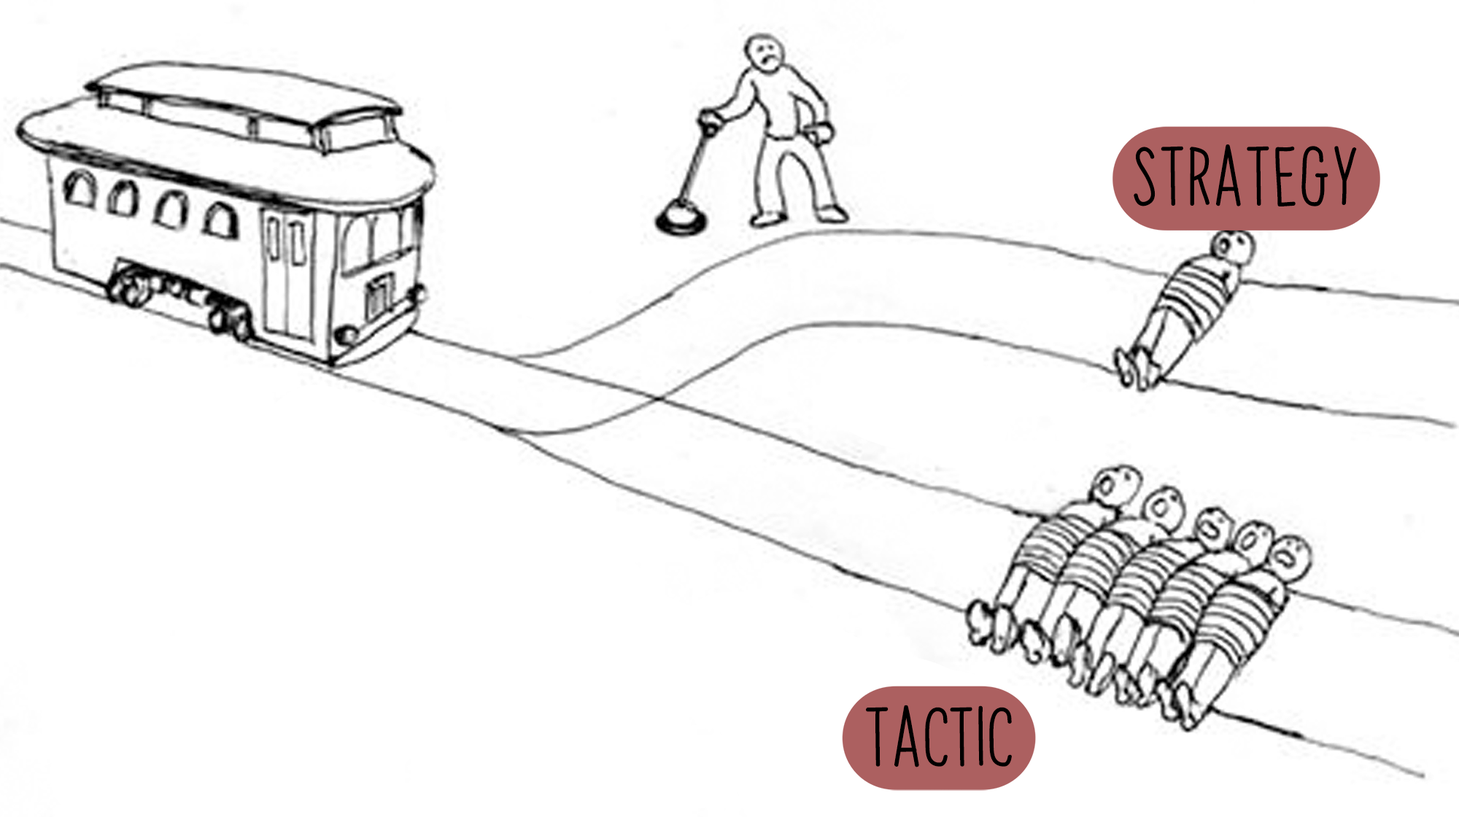
<style>
.page{position:relative;width:1459px;height:817px;background:#ffffff}
.page>*{position:absolute;margin:0}
.t1{font:51.2px "PapayaSunrise";color:#000000}
</style>
<div class="page">
<p class="t1" style="left:1134px;top:144px;width:223px;height:62px">strategy</p>
<p class="t1" style="left:866px;top:705px;width:146px;height:63px">tactic</p>
</div>
